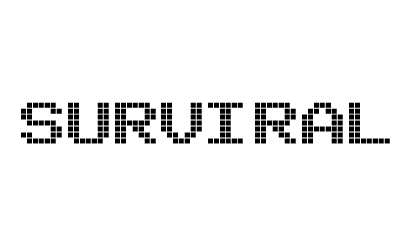
<style>
.page{position:relative;width:400px;height:250px;background:#ffffff}
.page>*{position:absolute;margin:0}
.t1{font:90px "Arcade";color:#000000}
</style>
<div class="page">
<p class="t1" style="left:21px;top:102px;width:369px;height:42px">SURVIRAL</p>
</div>
